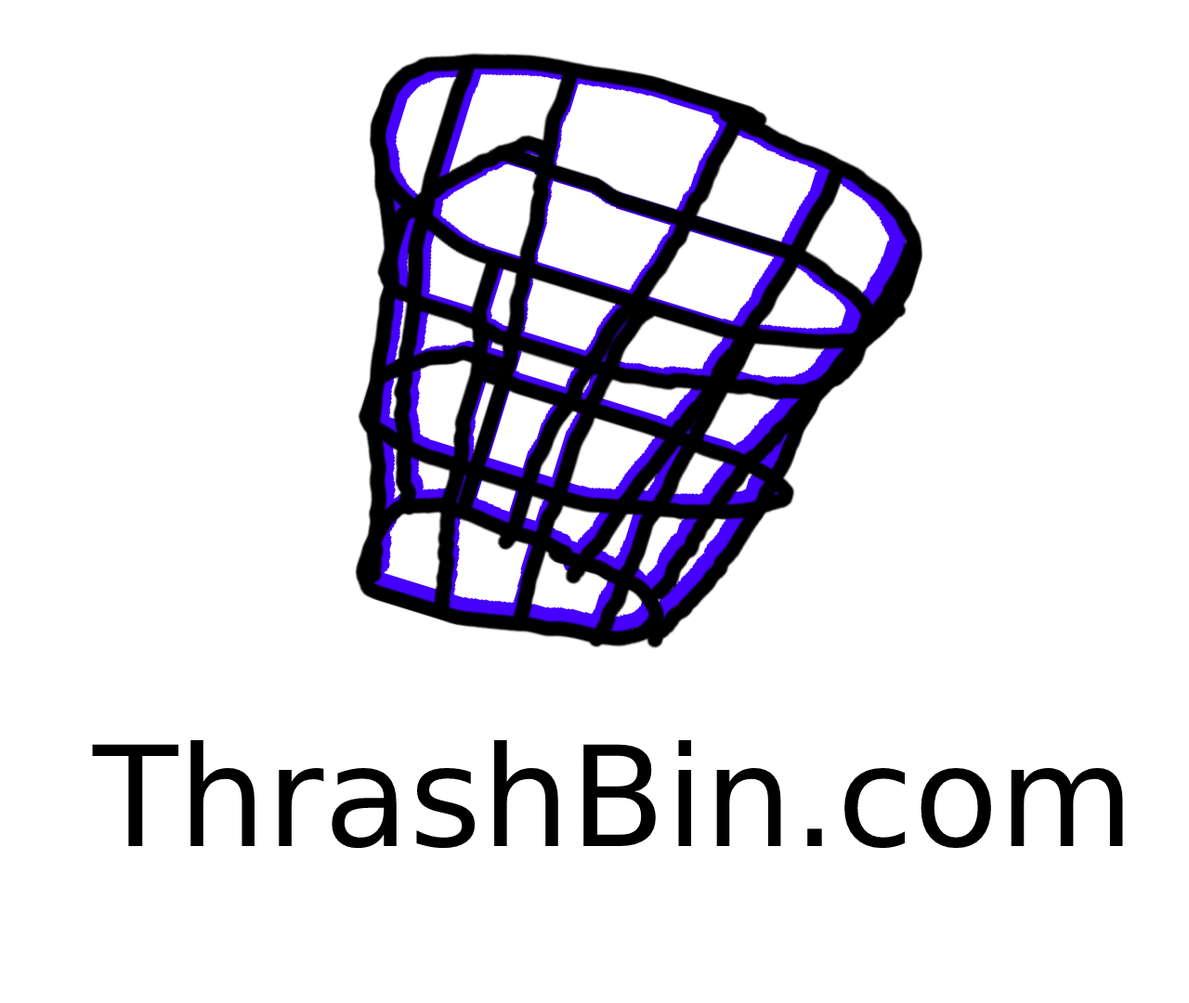
<style>
.page{position:relative;width:1189px;height:1003px;background:#ffffff}
.page>*{position:absolute;margin:0}
.t1{font:139.3px "DejaVuSans";color:#000000}
</style>
<div class="page">
<p class="t1" style="left:92px;top:740px;width:1031px;height:109px">ThrashBin.com</p>
</div>
